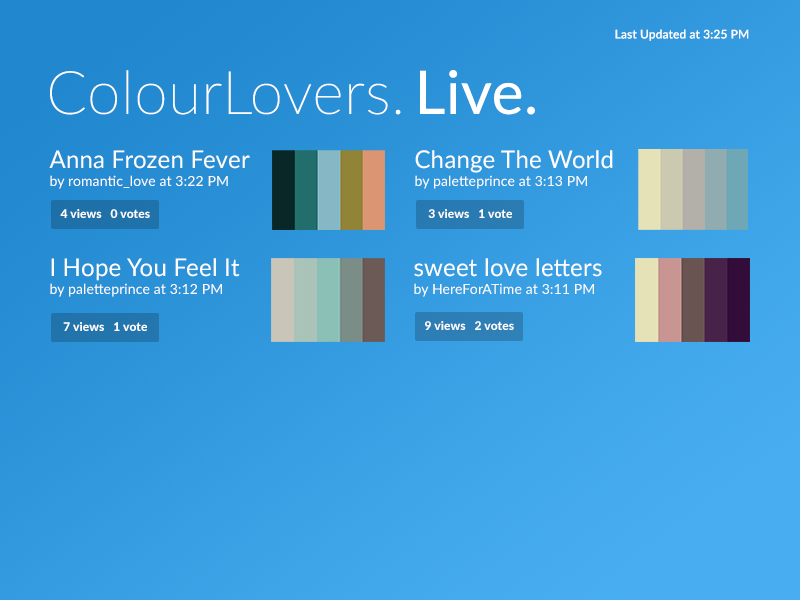
<style>
.page{position:relative;width:800px;height:600px}
.page>*{position:absolute;margin:0}
.t1{font:12px "Lato-Medium";letter-spacing:0.01em;color:#ffffff}
.t2{font:60px "Lato-Thin";letter-spacing:0.01em;color:#ffffff}
.t3{font:60px "Lato-Regular";letter-spacing:0.01em;color:#ffffff}
.t4{font:14px/18px "Lato-Regular";letter-spacing:0.01em;color:#ffffff}
.t5{font:24px/18px "Lato-Regular";letter-spacing:0.01em;color:#ffffff}
.t6{font:12px "Lato-Heavy";letter-spacing:0.01em;color:#ffffff}
</style>
<div class="page">
<p class="t1" style="left:615px;top:29px;width:134px;height:12px">Last Updated at 3:25 PM</p>
<p class="t2" style="left:50px;top:70px;width:485px;height:45px">ColourLovers. <span class="t3">Live.</span></p>
<p class="t4" style="left:49px;top:150px;width:201px;height:39px"><span class="t5">Anna Frozen Fever<br></span>by romantic_love at 3:22 PM</p>
<p class="t4" style="left:415px;top:150px;width:198px;height:39px"><span class="t5">Change The World<br></span>by paletteprince at 3:13 PM</p>
<p class="t6" style="left:60px;top:209px;width:90px;height:9px">4 views   0 votes</p>
<p class="t6" style="left:428px;top:209px;width:84px;height:9px">3 views   1 vote</p>
<p class="t4" style="left:50px;top:258px;width:190px;height:39px"><span class="t5">I Hope You Feel It<br></span>by paletteprince at 3:12 PM</p>
<p class="t4" style="left:414px;top:258px;width:188px;height:39px"><span class="t5">sweet love letters<br></span>by HereForATime at 3:11 PM</p>
<p class="t6" style="left:63px;top:322px;width:84px;height:9px">7 views   1 vote</p>
<p class="t6" style="left:425px;top:321px;width:89px;height:9px">9 views   2 votes</p>
</div>
